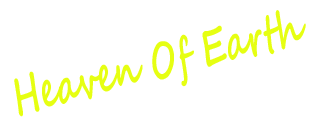
<style>
.page{position:relative;width:320px;height:131px;background:#ffffff}
.page>*{position:absolute;margin:0}
.t1{font:50px "SegoeScript-Bold";color:#e6ff12;scale:0.66 1}
</style>
<div class="page">
<p class="t1" style="left:14px;top:10px;width:292px;height:107px;rotate:-14deg">Heaven Of Earth</p>
</div>
